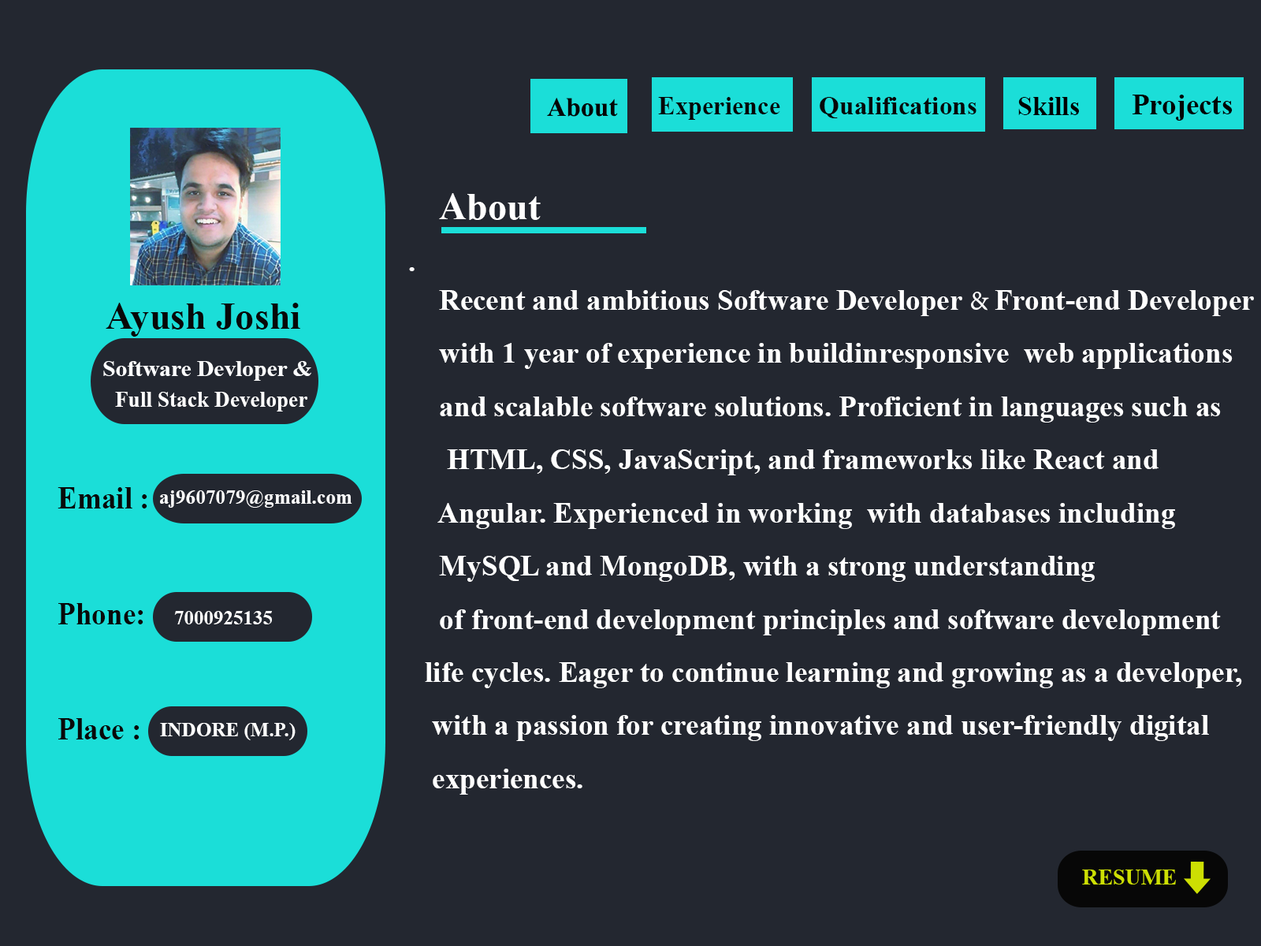
<style>
.page{position:relative;width:1261px;height:946px;background:#232730}
.page>*{position:absolute;margin:0}
.t1{font:26.5px "TimesNewRomanPS-BoldMT";color:#050505}
.t2{font:25.8px "TimesNewRomanPS-BoldMT";color:#060606}
.t3{font:25.8px "TimesNewRomanPS-BoldMT";color:#070707}
.t4{font:26.5px "TimesNewRomanPS-BoldMT";color:#010101}
.t5{font:29.2px "TimesNewRomanPS-BoldMT";color:#030303}
.t6{font:38.1px "TimesNewRomanPS-BoldMT";color:#ffffff}
.t7{font:29.4px "TimesNewRomanPS-BoldMT";color:#ffffff}
.t8{font:29.2px "TimesNewRomanPS-BoldMT";color:#ffffff}
.t9{font:15.1px "TimesNewRomanPS-BoldMT";color:#ffffff}
.t10{font:29.2px "AdobeDevanagari-Regular";color:#ffffff}
.t11{font:38.1px "TimesNewRomanPS-BoldMT";color:#080808}
.t12{font:23.1px "TimesNewRomanPS-BoldMT";color:#fcfdfe}
.t13{font:21.8px "TimesNewRomanPS-BoldMT";color:#ffffff}
.t14{font:31.7px "TimesNewRomanPS-BoldMT";color:#090909;scale:0.93 1}
.t15{font:19.7px "TimesNewRomanPS-BoldMT";color:#ffffff}
.t16{font:22.2px "TimesNewRomanPS-BoldMT";color:#cddf03}
</style>
<div class="page">
<p class="t1" style="left:547px;top:98px;width:71px;height:19px">About</p>
<p class="t2" style="left:658px;top:97px;width:122px;height:23px">Experience</p>
<p class="t3" style="left:820px;top:97px;width:156px;height:21px">Qualifications</p>
<p class="t4" style="left:1018px;top:97px;width:61px;height:18px">Skills</p>
<p class="t5" style="left:1132px;top:95px;width:101px;height:26px">Projects</p>
<p class="t6" style="left:439px;top:193px;width:102px;height:27px">About</p>
<p class="t7" style="left:409px;top:267px;width:6px;height:4px">.</p>
<p class="t8" style="left:425px;top:290px;width:829px;height:504px"><span class="t9">                         </span>Recent and ambitious Software Developer <span class="t10">&amp; </span>Front-end Developer <br>             with 1 year of experience in buildinresponsive  web applications <br>             and scalable software solutions. Proficient in languages such as <br>              HTML, CSS, JavaScript, and frameworks like React and <br>             Angular. Experienced in working  with databases including<br>             MySQL and MongoDB, with a strong understanding <br>             of front-end development principles and software development <br>           life cycles. Eager to continue learning and growing as a developer,<br>            with a passion for creating innovative and user-friendly digital <br>            experiences.</p>
<p class="t11" style="left:106px;top:303px;width:194px;height:34px">Ayush Joshi</p>
<p class="t12" style="left:103px;top:361px;width:208px;height:20px">Software Devloper &amp;</p>
<p class="t13" style="left:115px;top:392px;width:192px;height:19px">Full Stack Developer</p>
<p class="t14" style="left:58px;top:487px;width:89px;height:252px">Email : <br><br>Phone:<br><br>Place :</p>
<p class="t15" style="left:160px;top:490px;width:192px;height:18px">aj9607079@gmail.com</p>
<p class="t15" style="left:174px;top:611px;width:98px;height:13px">7000925135</p>
<p class="t15" style="left:160px;top:723px;width:136px;height:17px">INDORE (M.P.)</p>
<p class="t16" style="left:1082px;top:869px;width:94px;height:15px">RESUME</p>
</div>
